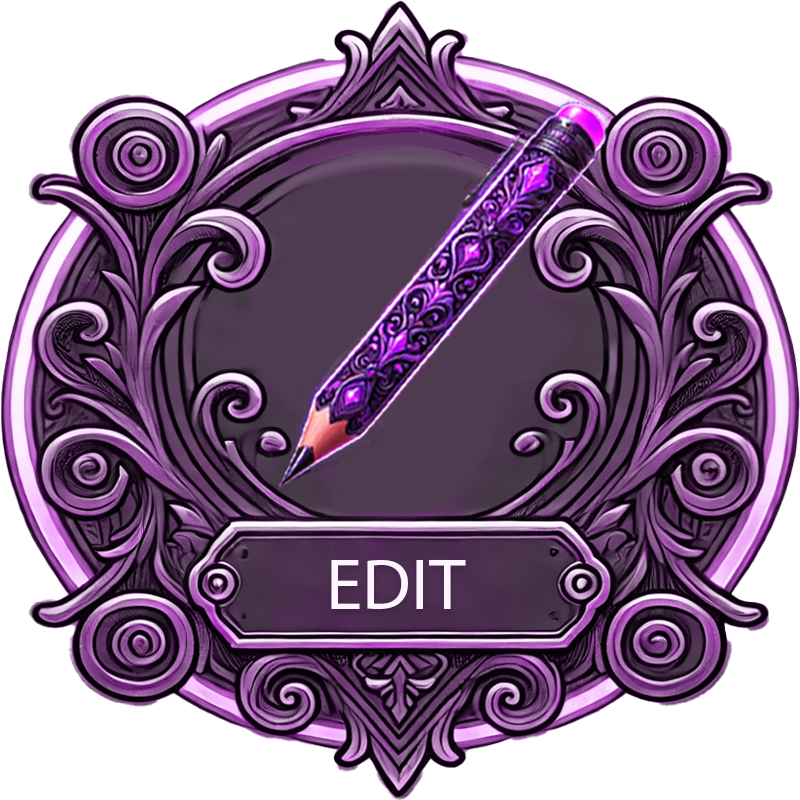
<style>
.page{position:relative;width:800px;height:800px;background:#ffffff}
.page>*{position:absolute;margin:0}
.t1{font:73.3px "MyriadPro-Regular";color:#fef5ff}
</style>
<div class="page">
<p class="t1" style="left:331px;top:560px;width:135px;height:49px">EDIT</p>
</div>
